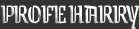
<style>
.page{position:relative;width:139px;height:29px;background:#333333}
.page>*{position:absolute;margin:0}
.t1{font:28.7px "GrenzeGotisch-Regular";letter-spacing:-0.06em;color:#ffffff;scale:0.96 1}
</style>
<div class="page">
<p class="t1" style="left:0px;top:5px;width:139px;height:25px">PROFE HARRY</p>
</div>
